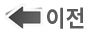
<style>
.page{position:relative;width:90px;height:33px;background:#ffffff}
.page>*{position:absolute;margin:0}
.t1{font:23.1px "NotoSansMonoCJKkr-Bold";color:#5b5b5b;scale:0.94 1}
</style>
<div class="page">
<p class="t1" style="left:47px;top:7px;width:37px;height:22px">이전</p>
</div>
